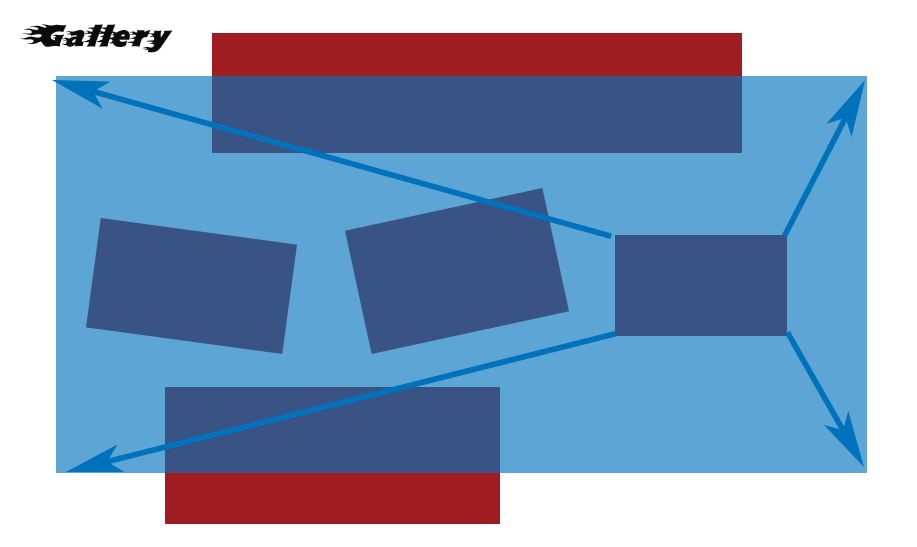
<style>
.page{position:relative;width:917px;height:547px;background:#5ca5d4}
.page>*{position:absolute;margin:0}
.t1{font:30px "Blazed";color:#0b0b0b}
</style>
<div class="page">
<p class="t1" style="left:20px;top:24px;width:153px;height:29px">Gallery</p>
</div>
